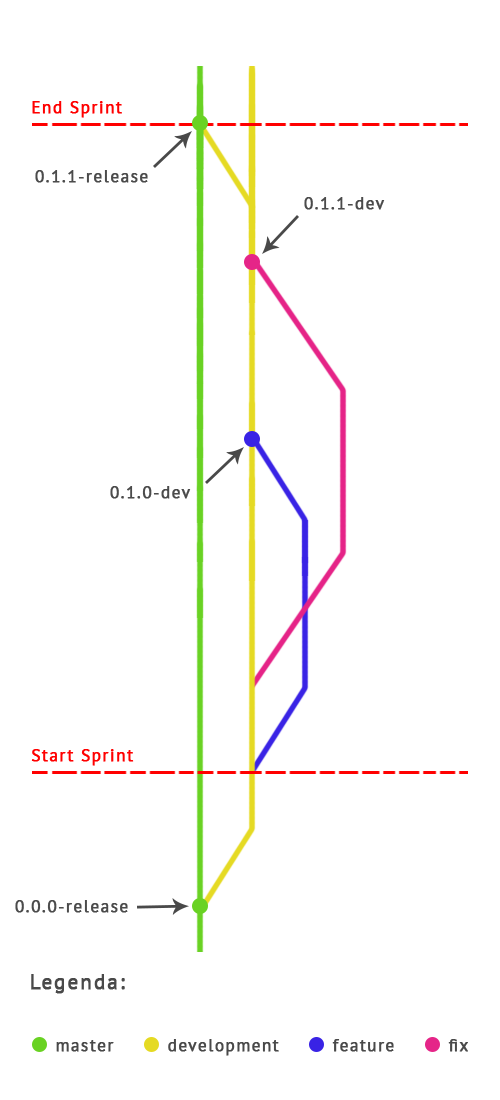
<style>
.page{position:relative;width:500px;height:1100px;background:#ffffff}
.page>*{position:absolute;margin:0}
.t1{font:16.7px "PTSans-Regular";letter-spacing:0.08em;color:#ff0000;font-weight:bold}
.t2{font:16.7px "PTSans-Regular";letter-spacing:0.08em;color:#4b4b4b;font-weight:bold}
.t3{font:20.8px "PTSans-Regular";letter-spacing:0.08em;color:#494949;font-weight:bold}
.t4{font:16.7px "PTSans-Regular";letter-spacing:0.08em;color:#494949;font-weight:bold}
</style>
<div class="page">
<p class="t1" style="left:32px;top:101px;width:90px;height:17px">End Sprint</p>
<p class="t2" style="left:35px;top:170px;width:113px;height:13px">0.1.1-release</p>
<p class="t2" style="left:304px;top:197px;width:81px;height:13px">0.1.1-dev</p>
<p class="t2" style="left:110px;top:486px;width:81px;height:13px">0.1.0-dev</p>
<p class="t1" style="left:31px;top:749px;width:103px;height:17px">Start Sprint</p>
<p class="t2" style="left:15px;top:900px;width:113px;height:13px">0.0.0-release</p>
<p class="t3" style="left:31px;top:974px;width:94px;height:20px">Legenda:</p>
<p class="t4" style="left:56px;top:1040px;width:58px;height:12px">master</p>
<p class="t4" style="left:168px;top:1039px;width:111px;height:17px">development</p>
<p class="t4" style="left:332px;top:1039px;width:62px;height:13px">feature</p>
<p class="t4" style="left:448px;top:1039px;width:20px;height:13px">fix</p>
</div>
